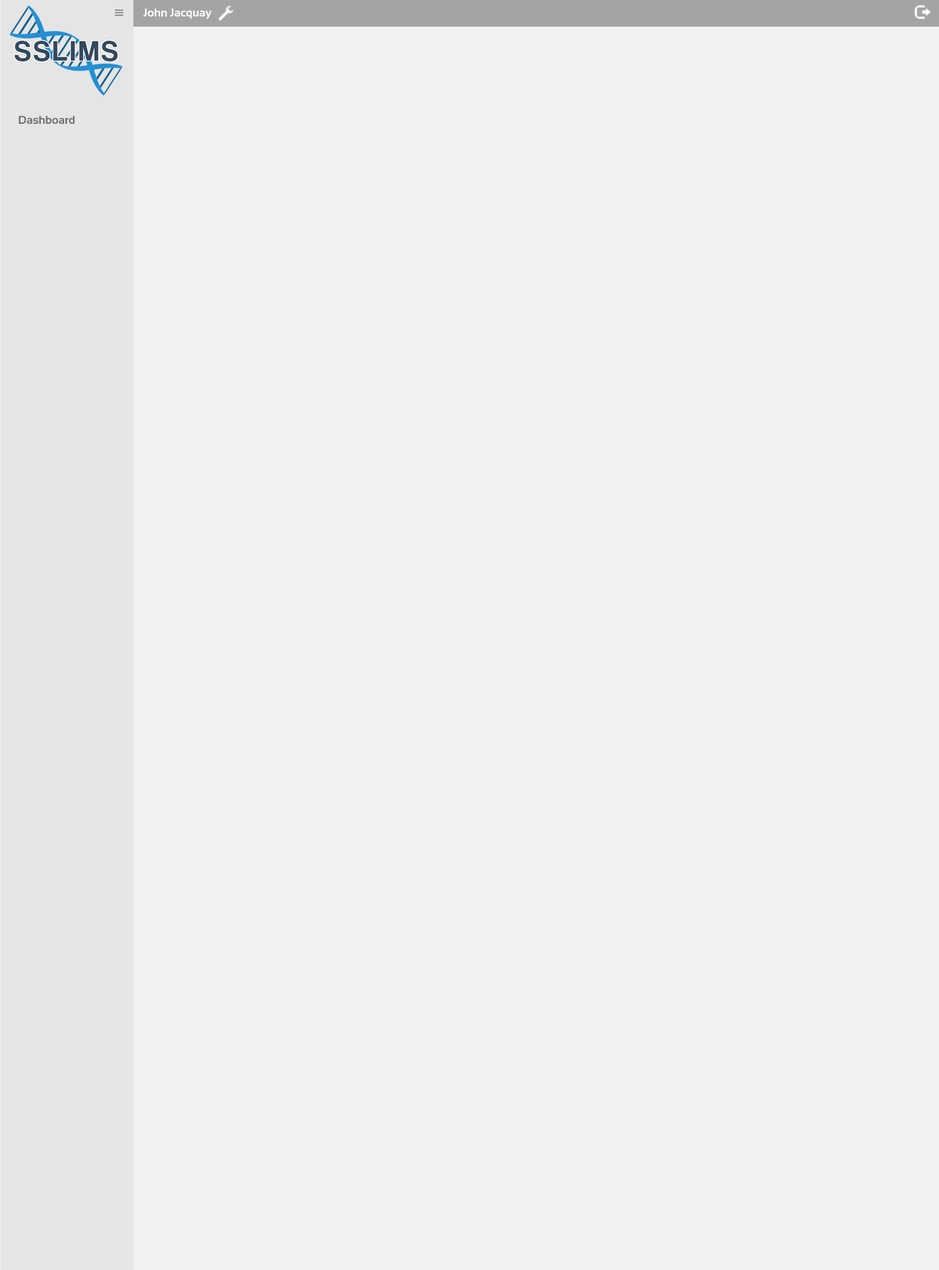
<style>
.page{position:relative;width:939px;height:1270px;background:#f1f1f1}
.page>*{position:absolute;margin:0}
.t1{font:11.4px "Sansation-Bold";color:#ffffff}
.t2{font:11.4px "Sansation-Bold";color:#6f6f6f}
</style>
<div class="page">
<p class="t1" style="left:143px;top:8px;width:68px;height:11px">John Jacquay</p>
<p class="t2" style="left:18px;top:116px;width:57px;height:8px">Dashboard</p>
</div>
